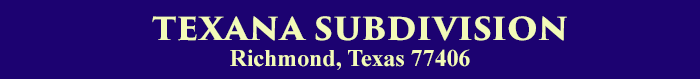
<style>
.page{position:relative;width:700px;height:79px;background:#1c0271}
.page>*{position:absolute;margin:0}
.t1{font:35.9px "TrajanPro3-Bold";color:#f3fab8}
.t2{font:23.9px "TimesNewRomanPS-BoldMT";color:#f3fab8}
</style>
<div class="page">
<p class="t1" style="left:152px;top:16px;width:415px;height:25px">texana subdivision</p>
<p class="t2" style="left:230px;top:49px;width:240px;height:21px">Richmond, Texas 77406</p>
</div>
